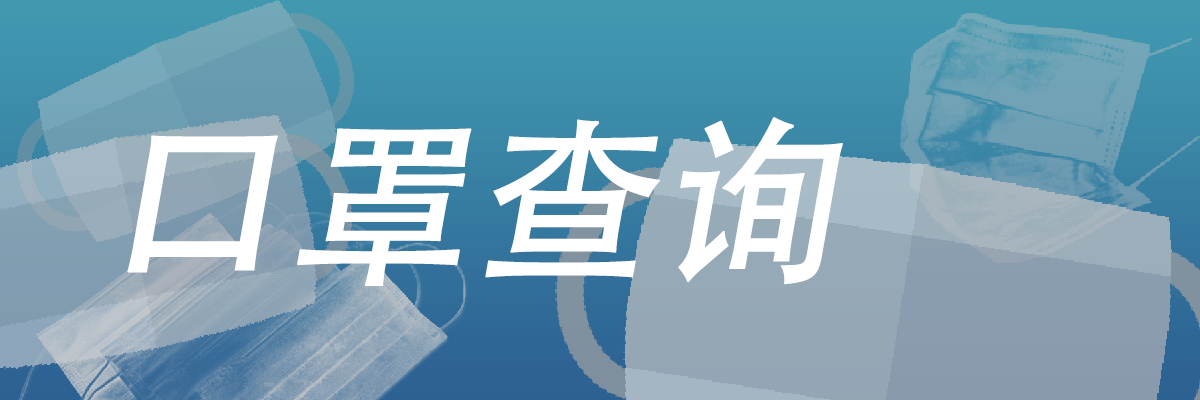
<style>
.page{position:relative;width:1200px;height:400px}
.page>*{position:absolute;margin:0}
.t1{font:180px "AdobeHeitiStd-Regular";color:#ffffff;font-weight:bold;font-style:italic}
</style>
<div class="page">
<p class="t1" style="left:127px;top:117px;width:716px;height:169px">口罩查询</p>
</div>
